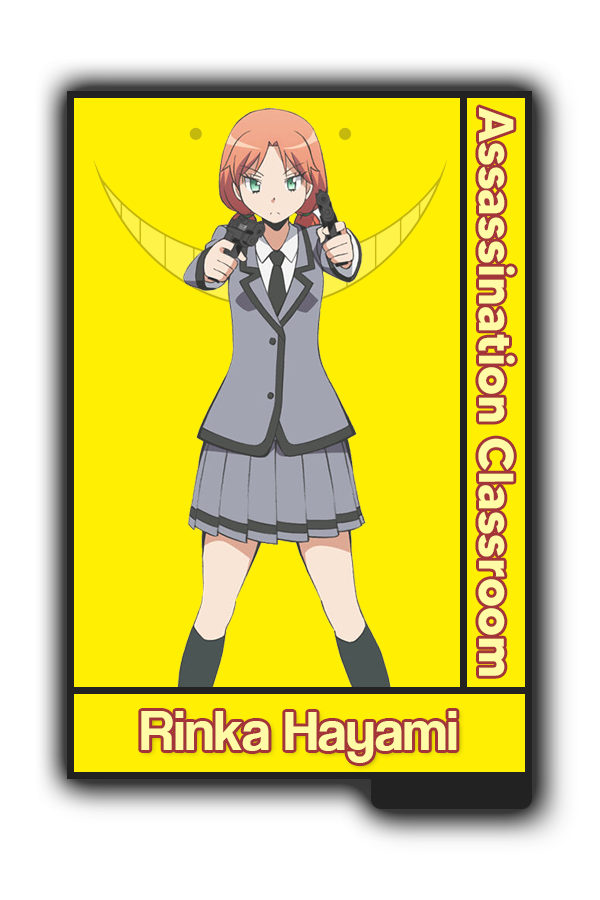
<style>
.page{position:relative;width:600px;height:900px;background:#ffef03}
.page>*{position:absolute;margin:0}
.t1{font:48.8px "MADETOMMY-Bold";color:#fefaa5}
.t2{font:57.8px "CoolveticaRg-Regular";color:#fefaa5}
</style>
<div class="page">
<p class="t1" style="left:478px;top:107px;width:37px;height:569px;rotate:90deg">Assassination Classroom</p>
<p class="t2" style="left:141px;top:711px;width:316px;height:52px">Rinka Hayami</p>
</div>
